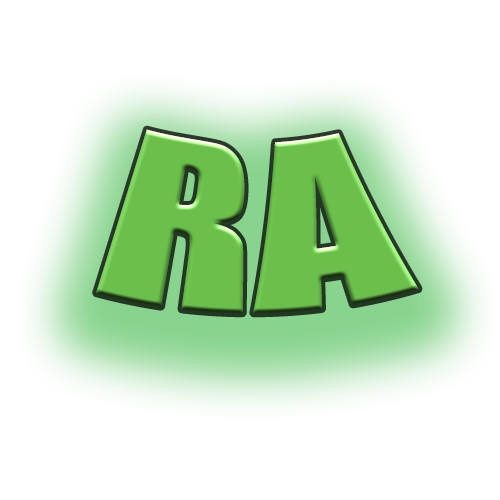
<style>
.page{position:relative;width:500px;height:500px;background:#ffffff}
.page>*{position:absolute;margin:0}
.t1{font:200px "Impact";color:#6bc04b}
</style>
<div class="page">
<p class="t1" style="left:96px;top:129px;width:323px;height:185px">RA</p>
</div>
